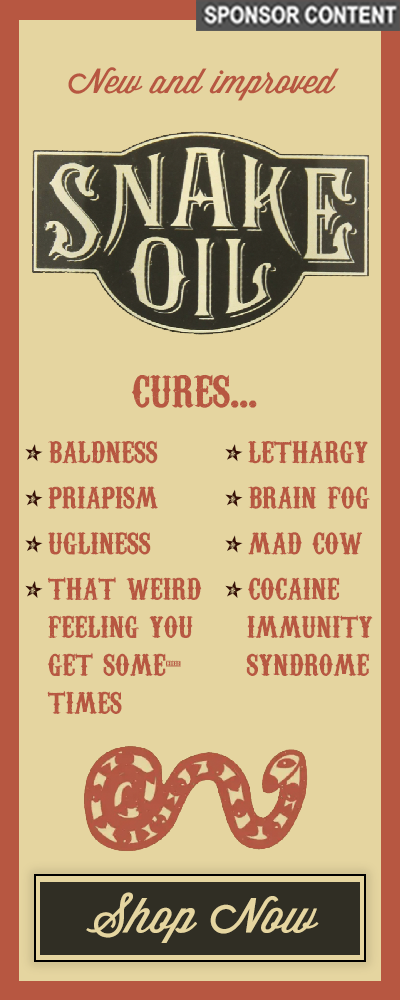
<style>
.page{position:relative;width:400px;height:1000px;background:#e5d5a0}
.page>*{position:absolute;margin:0}
.t1{font:34px "WisdomScriptAI";color:#b75741}
.t2{font:56px "CarnivaleeFreakshow";color:#b75741}
.t3{font:38px "CarnivaleeFreakshow";color:#b75741}
.t4{font:38px "CarnivaleeFreakshow";color:#360e05}
.t5{font:38px/38px "CarnivaleeFreakshow";color:#b75741}
.t6{font:48px "WisdomScriptAI";color:#e5d5a0}
</style>
<div class="page">
<p class="t1" style="left:68px;top:67px;width:271px;height:34px">New and improved</p>
<p class="t2" style="left:131px;top:374px;width:126px;height:34px">cures...</p>
<p class="t3" style="left:25px;top:441px;width:177px;height:159px"><span class="t4">• </span>baldness<br><span class="t4">• </span>priapism<br><span class="t4">• </span>ugliness<br><span class="t4">• </span>that weird</p>
<p class="t3" style="left:225px;top:440px;width:145px;height:160px"><span class="t4">• </span>lethargy<br><span class="t4">• </span>brain fog<br><span class="t4">• </span>mad cow<br><span class="t4">• </span>cocaine</p>
<p class="t5" style="left:47px;top:615px;width:146px;height:99px">feeling you <br>get some-<br>times</p>
<p class="t3" style="left:246px;top:614px;width:127px;height:62px">immunity syndrome</p>
<p class="t6" style="left:86px;top:892px;width:233px;height:51px">Shop Now</p>
</div>
